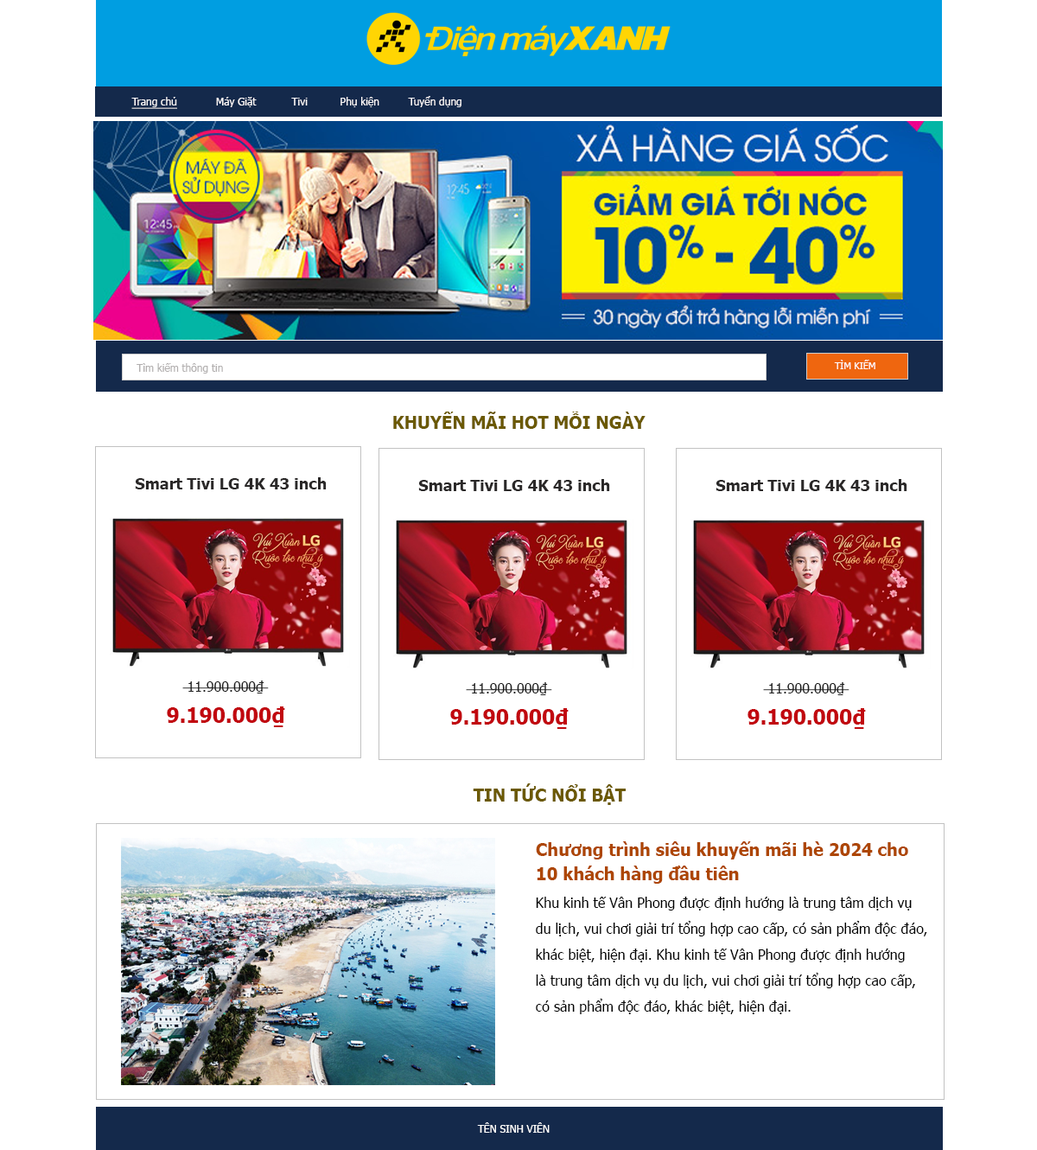
<style>
.page{position:relative;width:1037px;height:1150px;background:#ffffff}
.page>*{position:absolute;margin:0}
.t1{font:10.4px "Tahoma";color:#fefbfb}
.t2{font:10.4px "Tahoma";color:#fefbfb;text-decoration:underline}
.t3{font:10.4px "Tahoma";color:#b2afaf}
.t4{font:9.5px "Tahoma";color:#fefbfb}
.t5{font:17.3px "Tahoma-Bold";color:#6b5902}
.t6{font:15.6px "Tahoma-Bold";color:#2a2828}
.t7{font:13.8px/31.1px "Tahoma";color:#1d1d1d}
.t8{font:20.7px/31.1px "Tahoma-Bold";color:#c1080f}
.t9{font:17.3px/24.2px "Tahoma-Bold";color:#ad4601}
.t10{font:13.8px/25.9px "Tahoma";color:#000000}
.t11{font:10.4px "Tahoma";color:#ffffff}
</style>
<div class="page">
<p class="t1" style="left:131px;top:96px;width:331px;height:13px"><span class="t2">Trang chủ</span>            Máy Giặt           Tivi          Phụ kiện         Tuyển dụng</p>
<p class="t3" style="left:137px;top:363px;width:86px;height:10px">Tìm kiếm thông tin</p>
<p class="t4" style="left:834px;top:360px;width:42px;height:9px">TÌM KIẾM</p>
<p class="t5" style="left:393px;top:411px;width:253px;height:18px">KHUYẾN MÃI HOT MỖI NGÀY</p>
<p class="t6" style="left:135px;top:477px;width:192px;height:12px">Smart Tivi LG 4K 43 inch</p>
<p class="t6" style="left:418px;top:479px;width:192px;height:12px">Smart Tivi LG 4K 43 inch</p>
<p class="t6" style="left:716px;top:479px;width:192px;height:12px">Smart Tivi LG 4K 43 inch</p>
<p class="t7" style="left:167px;top:680px;width:118px;height:47px;text-align:center">11.900.000₫ <br><span class="t8">9.190.000₫</span></p>
<p class="t7" style="left:450px;top:682px;width:119px;height:47px;text-align:center">11.900.000₫ <br><span class="t8">9.190.000₫</span></p>
<p class="t7" style="left:748px;top:682px;width:118px;height:47px;text-align:center">11.900.000₫ <br><span class="t8">9.190.000₫</span></p>
<p class="t5" style="left:473px;top:783px;width:153px;height:22px">TIN TỨC NỔI BẬT</p>
<p class="t9" style="left:536px;top:841px;width:372px;height:42px">Chương trình siêu khuyến mãi hè 2024 cho<br>10 khách hàng đầu tiên</p>
<p class="t10" style="left:536px;top:896px;width:391px;height:118px">Khu kinh tế Vân Phong được định hướng là trung tâm dịch vụ <br>du lịch, vui chơi giải trí tổng hợp cao cấp, có sản phẩm độc đáo, <br>khác biệt, hiện đại. Khu kinh tế Vân Phong được định hướng <br>là trung tâm dịch vụ du lịch, vui chơi giải trí tổng hợp cao cấp, <br>có sản phẩm độc đáo, khác biệt, hiện đại.</p>
<p class="t11" style="left:477px;top:1122px;width:73px;height:10px">TÊN SINH VIÊN</p>
</div>
